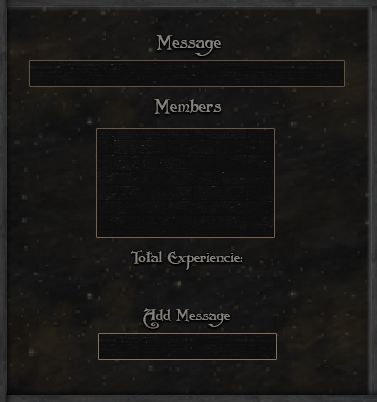
<style>
.page{position:relative;width:377px;height:402px}
.page>*{position:absolute;margin:0}
.t1{font:17.7px "Folkard";color:#88837e}
.t2{font:14.8px "Folkard";color:#88837e}
</style>
<div class="page">
<p class="t1" style="left:156px;top:35px;width:65px;height:21px">Message</p>
<p class="t1" style="left:154px;top:99px;width:68px;height:15px">Members</p>
<p class="t2" style="left:130px;top:250px;width:113px;height:20px">Total Experiencie:</p>
<p class="t2" style="left:143px;top:308px;width:87px;height:21px">Add Message</p>
</div>
